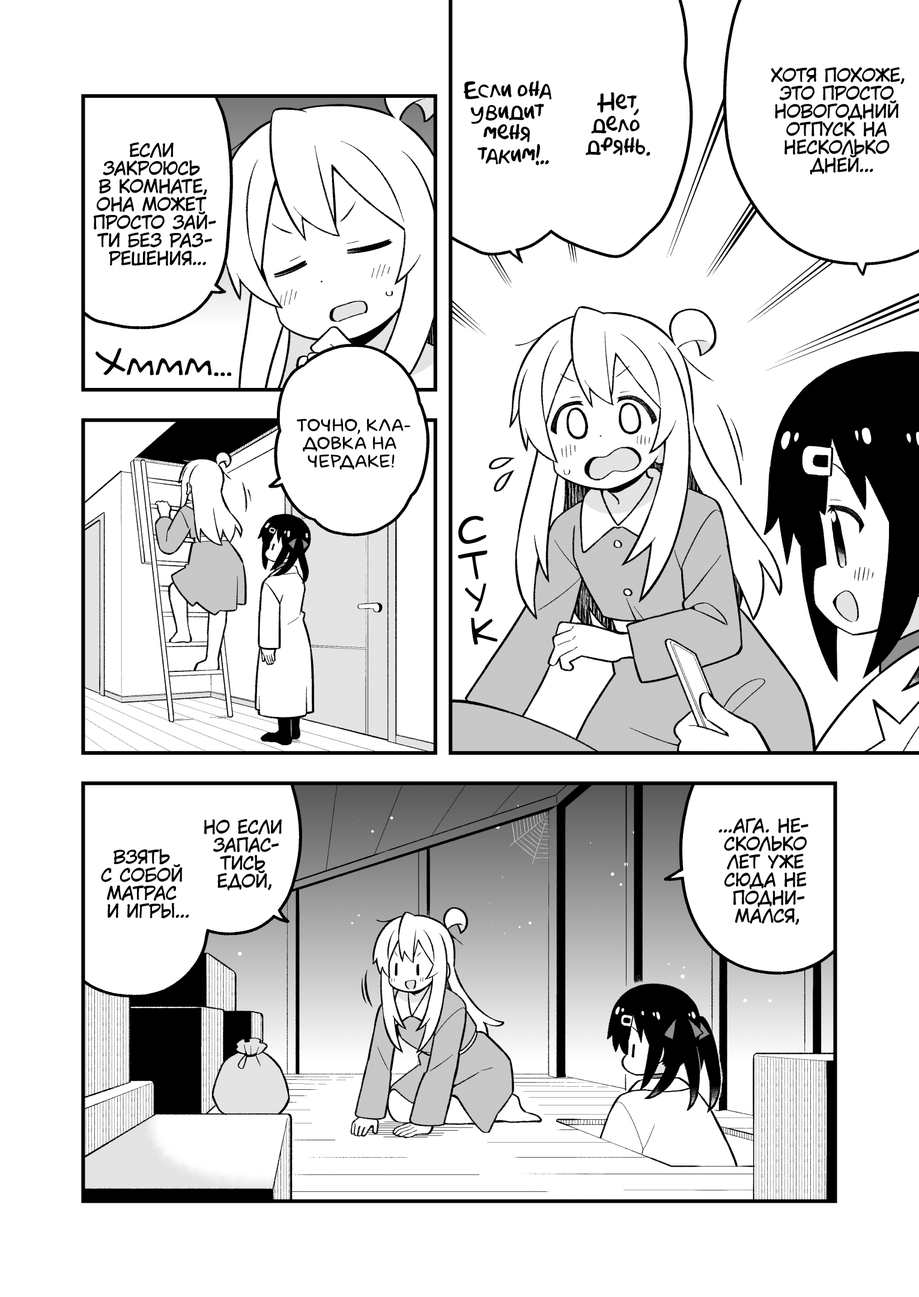
<style>
.page{position:relative;width:919px;height:1297px;background:#ffffff}
.page>*{position:absolute;margin:0}
.t1{font:18px "KuraiVoice2";color:#000000;text-transform:uppercase}
.t2{font:21.6px "AkbarPlain";color:#000000}
.t3{font:36px "v_Augie";color:#000000}
.t4{font:18px "laCartoonerie";color:#000000;text-transform:uppercase}
.t5{font:36px "v_Augie";color:#000000;text-transform:uppercase;font-weight:bold}
</style>
<div class="page">
<p class="t1" style="left:771px;top:67px;width:134px;height:108px;text-align:center">Хотя похоже,<br>это просто<br>новогодний<br>отпуск на<br>несколько<br>дней...</p>
<p class="t2" style="left:464px;top:80px;width:87px;height:86px;text-align:center">Если она<br>увидит<br>меня<br>таким!..</p>
<p class="t2" style="left:586px;top:92px;width:65px;height:64px;text-align:center">Нет,<br>дело<br>дрянь.</p>
<p class="t1" style="left:93px;top:142px;width:123px;height:124px;text-align:center">Если<br>закроюсь<br>в комнате,<br>она может<br>просто зай-<br>ти без раз-<br>решения...</p>
<p class="t3" style="left:96px;top:348px;width:135px;height:29px">Хммм...</p>
<p class="t4" style="left:297px;top:418px;width:113px;height:52px;text-align:center">Точно, кла-<br>довка на<br>чердаке!</p>
<p class="t5" style="left:458px;top:516px;width:29px;height:28px;rotate:-9deg">с</p>
<p class="t5" style="left:458px;top:550px;width:30px;height:30px;rotate:-5deg">т</p>
<p class="t5" style="left:465px;top:583px;width:22px;height:29px;rotate:-2deg">у</p>
<p class="t5" style="left:471px;top:618px;width:26px;height:27px;rotate:-9deg">к</p>
<p class="t1" style="left:204px;top:819px;width:78px;height:72px;text-align:center">но если<br>запас-<br>тись<br>едой,</p>
<p class="t1" style="left:718px;top:818px;width:91px;height:107px;text-align:center">...Ага. Не-<br>сколько<br>лет уже<br>сюда не<br>подни-<br>мался,</p>
<p class="t1" style="left:101px;top:849px;width:88px;height:70px;text-align:center">взять<br>с собой<br>матрас<br>и игры...</p>
</div>
